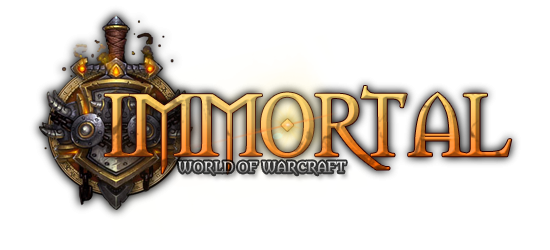
<style>
.page{position:relative;width:550px;height:250px;background:#ffffff}
.page>*{position:absolute;margin:0}
.t1{font:81.9px "Morpheus";letter-spacing:-0.04em;font-weight:bold}
.t2{font:14px "Metamorphous";letter-spacing:-0.04em;font-weight:bold}
</style>
<div class="page">
<p class="t1" style="left:104px;top:86px;width:408px;height:88px">IMMORTAL</p>
<p class="t2" style="left:178px;top:161px;width:168px;height:14px">WORLD OF WARCRAFT</p>
</div>
